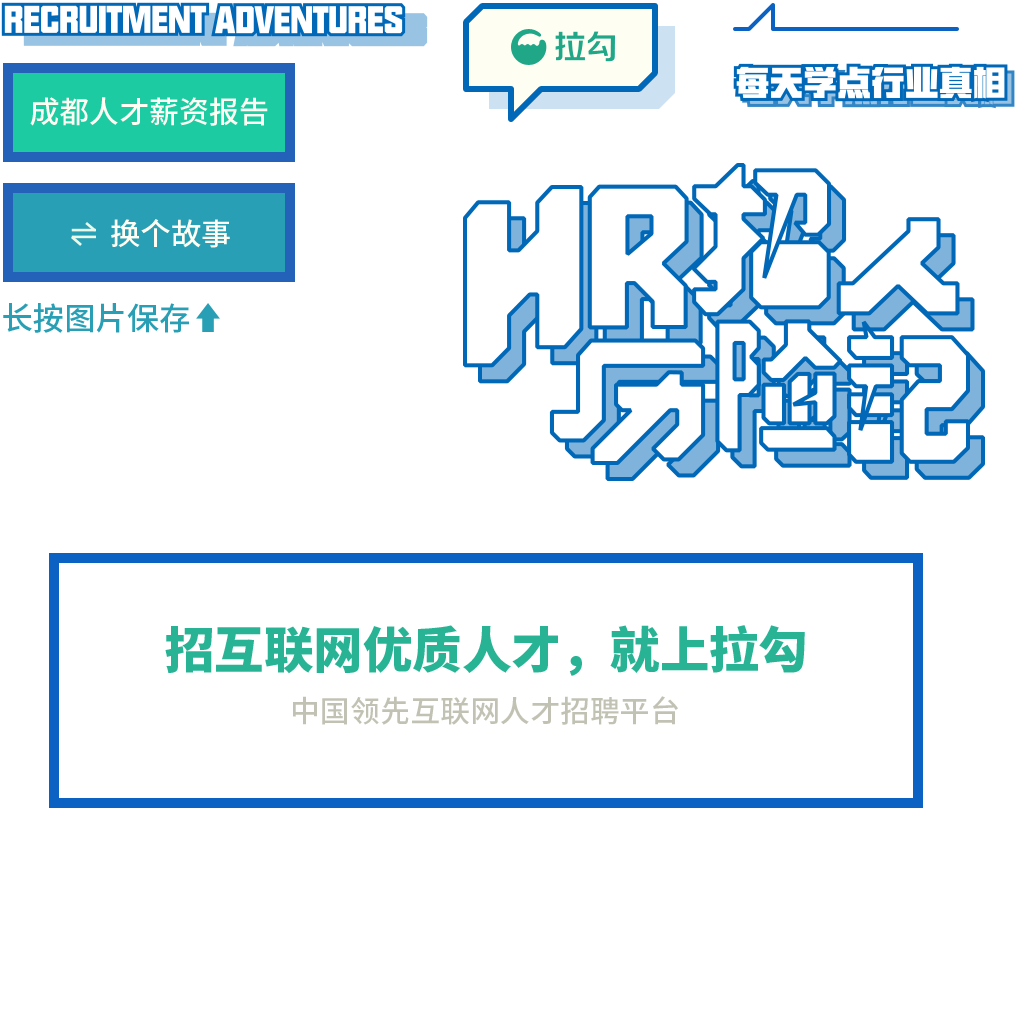
<style>
.page{position:relative;width:1024px;height:1024px;background:#ffffff}
.page>*{position:absolute;margin:0}
.t1{font:30.4px "SourceHanSansCN-Medium";color:#fefef2}
.t2{font:31.6px "SourceHanSansCN-Medium";color:#289fb4}
.t3{font:49.5px "SourceHanSansCN-Heavy";color:#28b494}
.t4{font:30px "SourceHanSansCN-Medium";color:#c2c2b4}
</style>
<div class="page">
<p class="t1" style="left:30px;top:97px;width:238px;height:29px">成都人才薪资报告</p>
<p class="t1" style="left:111px;top:219px;width:119px;height:29px">换个故事</p>
<p class="t2" style="left:3px;top:303px;width:186px;height:30px">长按图片保存</p>
<p class="t3" style="left:165px;top:625px;width:640px;height:51px">招互联网优质人才，就上拉勾</p>
<p class="t4" style="left:293px;top:696px;width:385px;height:29px">中国领先互联网人才招聘平台</p>
</div>
